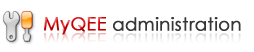
<style>
.page{position:relative;width:254px;height:52px;background:#ffffff}
.page>*{position:absolute;margin:0}
.t1{font:18px "CenturyGothic";font-weight:bold}
.t2{font:18px "CenturyGothic";color:#373737;font-weight:bold}
.t3{font:18px "CenturyGothic";color:#f3f3f3;font-weight:bold}
</style>
<div class="page">
<p class="t1" style="left:44px;top:17px;width:63px;height:18px">MyQEE</p>
<p class="t2" style="left:113px;top:17px;width:128px;height:14px">administration</p>
<p class="t3" style="left:113px;top:33px;width:128px;height:15px">administration</p>
</div>
